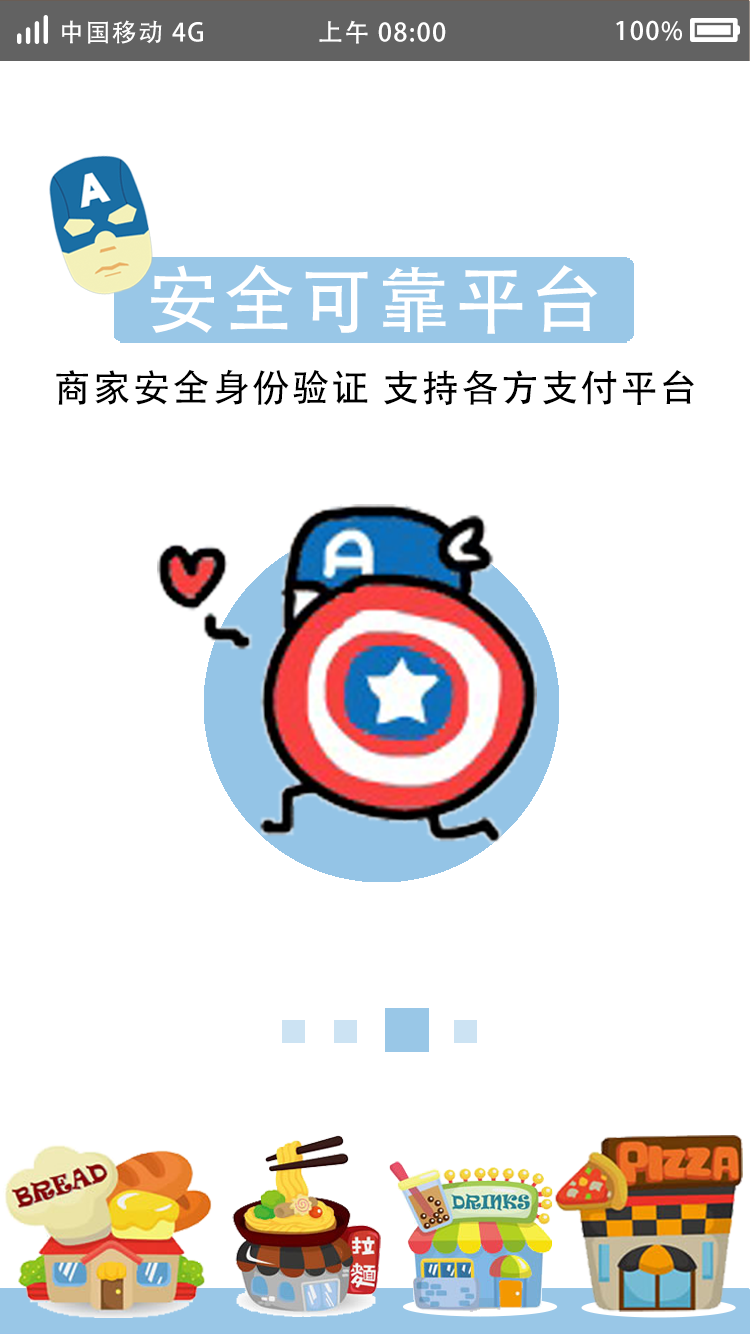
<style>
.page{position:relative;width:750px;height:1334px;background:#ffffff}
.page>*{position:absolute;margin:0}
.t1{font:25px "AdobeHeitiStd-Regular";letter-spacing:0.06em;color:#ffffff}
.t2{font:73px "AdobeHeitiStd-Regular";letter-spacing:0.06em;color:#ffffff}
.t3{font:37.5px "AdobeHeitiStd-Regular";letter-spacing:0.06em;color:#000000}
</style>
<div class="page">
<p class="t1" style="left:62px;top:20px;width:141px;height:24px">中国移动 4G</p>
<p class="t1" style="left:319px;top:20px;width:127px;height:24px">上午 08:00</p>
<p class="t1" style="left:616px;top:20px;width:66px;height:21px">100%</p>
<p class="t2" style="left:151px;top:264px;width:447px;height:70px">安全可靠平台</p>
<p class="t3" style="left:56px;top:369px;width:638px;height:37px">商家安全身份验证 支持各方支付平台</p>
</div>
